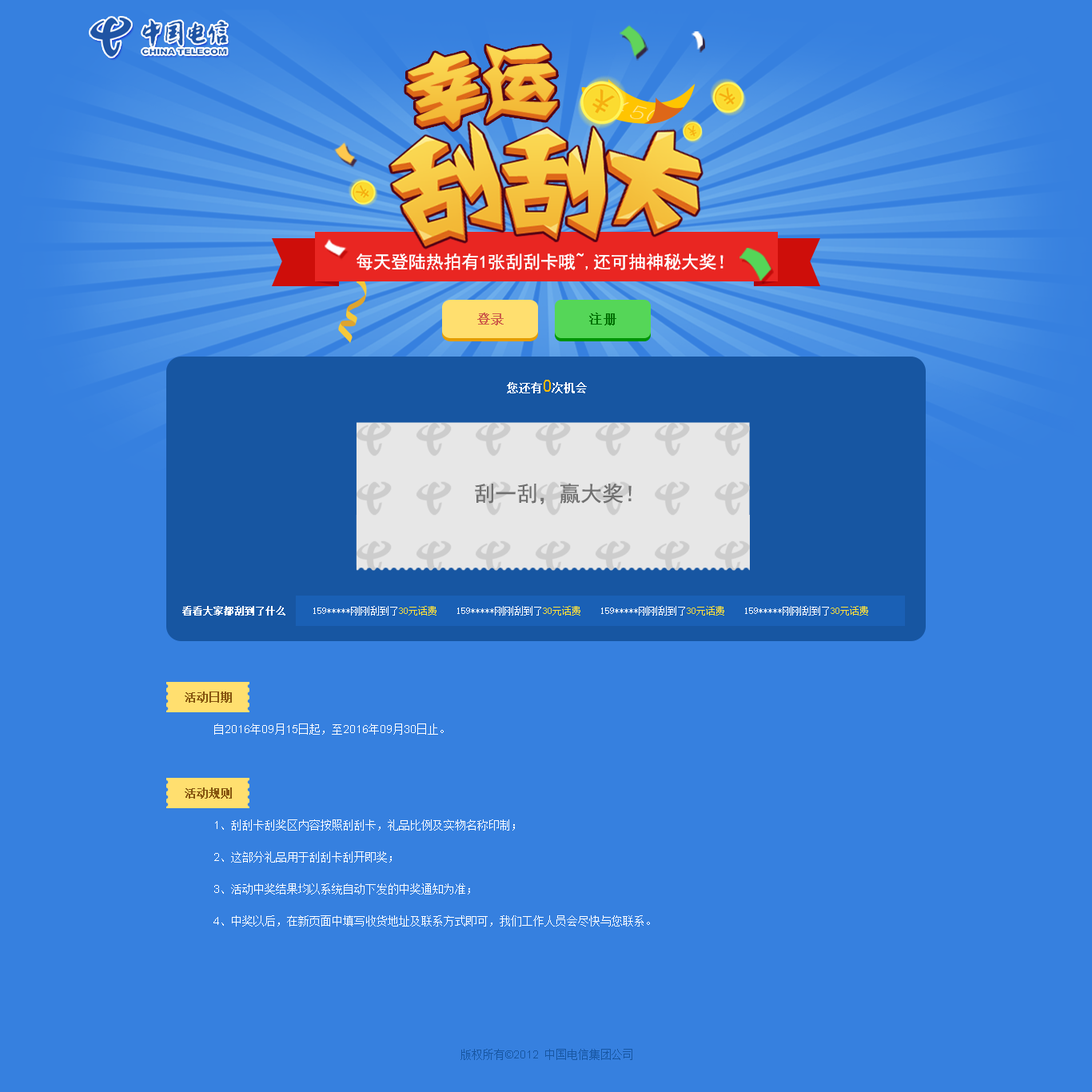
<style>
.page{position:relative;width:1092px;height:1092px;background:#3680df}
.page>*{position:absolute;margin:0}
.t1{font:17.6px "SimHei";color:#ffffff}
.t2{font:12.8px "SimSun";color:#ce5d4a;font-weight:bold}
.t3{font:12.8px "SimSun";color:#007203;font-weight:bold}
.t4{font:11.2px "SimSun";color:#ffffff;font-weight:bold}
.t5{font:16px "ArialMT";color:#ffba00}
.t6{font:21.4px "SimHei";color:#707070}
.t7{font:9.6px "SimSun";color:#ffffff;font-weight:bold}
.t8{font:9.6px "SimSun";color:#ffffff}
.t9{font:9.6px "SimSun";color:#fde03c}
.t10{font:11.2px/32px "SimSun";color:#ffffff}
.t11{font:11.2px/32px "SimSun";color:#875610;font-weight:bold}
.t12{font:11.2px/32px "ArialMT";color:#ffffff}
.t13{font:11.2px "SimSun";color:#1756a2}
.t14{font:11.2px "ArialMT";color:#1756a2}
</style>
<div class="page">
<p class="t1" style="left:357px;top:253px;width:366px;height:17px">每天登陆热拍有1张刮刮卡哦~,还可抽神秘大奖！</p>
<p class="t2" style="left:477px;top:313px;width:27px;height:12px">登录</p>
<p class="t3" style="left:589px;top:313px;width:27px;height:12px">注册</p>
<p class="t4" style="left:507px;top:380px;width:80px;height:13px">您还有<span class="t5">0</span>次机会</p>
<p class="t6" style="left:475px;top:483px;width:157px;height:21px">刮一刮，赢大奖！</p>
<p class="t7" style="left:182px;top:606px;width:103px;height:10px">看看大家都刮到了什么</p>
<p class="t8" style="left:313px;top:606px;width:555px;height:10px">159*****刚刚刮到了<span class="t9">30元话费    </span>159*****刚刚刮到了<span class="t9">30元话费    </span>159*****刚刚刮到了<span class="t9">30元话费    </span>159*****刚刚刮到了<span class="t9">30元话费</span></p>
<p class="t10" style="left:185px;top:691px;width:465px;height:236px"><span class="t11">活动日期<br></span> 自<span class="t12">2016</span>年<span class="t12">09</span>月<span class="t12">15</span>日起，至<span class="t12">2016</span>年<span class="t12">09</span>月<span class="t12">30</span>日止。<br><br><span class="t11">活动规则<br> </span><span class="t12">1</span>、刮刮卡刮奖区内容按照刮刮卡，礼品比例及实物名称印制；<br> <span class="t12">2</span>、这部分礼品用于刮刮卡刮开即奖；<br> <span class="t12">3</span>、活动中奖结果均以系统自动下发的中奖通知为准；<br> <span class="t12">4</span>、中奖以后，在新页面中填写收货地址及联系方式即可，我们工作人员会尽快与您联系。</p>
<p class="t13" style="left:460px;top:1049px;width:172px;height:11px">版权所有<span class="t14">©2012</span> 中国电信集团公司</p>
</div>
